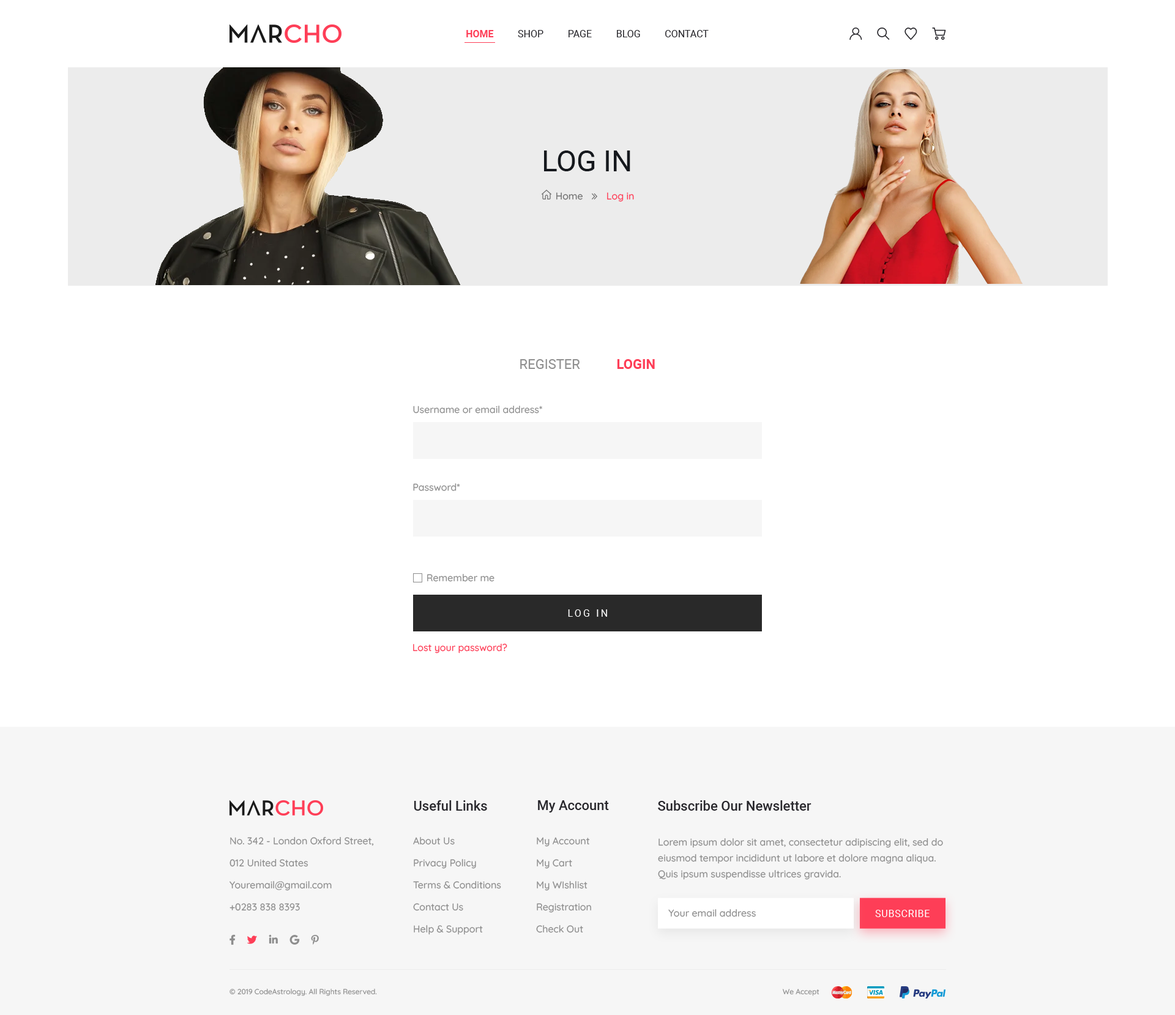
<style>
.page{position:relative;width:1175px;height:1015px;background:#ffffff}
.page>*{position:absolute;margin:0}
.t1{font:9.8px "Roboto-Regular";color:#29282d}
.t2{font:9.8px "Roboto-Bold";color:#fe3e57}
.t3{font:29.4px "Roboto-Regular";color:#15181d}
.t4{font:9.8px "Quicksand-Medium";color:#727272}
.t5{font:9.8px "Quicksand-Medium";color:#fe3e57}
.t6{font:13.5px "Roboto-Regular";color:#909090}
.t7{font:13.5px "Roboto-Bold";color:#fe3e57}
.t8{font:9.8px "Quicksand-Medium";color:#8d8d8d}
.t9{font:9.8px "Roboto-Regular";letter-spacing:0.2em;color:#ffffff}
.t10{font:13.5px "Roboto-Medium";color:#29282d}
.t11{font:9.8px/22px "Quicksand-Medium";color:#8d8d8d}
.t12{font:9.8px/15.9px "Quicksand-Medium";color:#8d8d8d}
.t13{font:9.8px "Roboto-Regular";letter-spacing:0.05em;color:#ffffff;text-transform:uppercase}
.t14{font:7.3px "Quicksand-Medium";color:#8d8d8d}
</style>
<div class="page">
<p class="t1" style="left:466px;top:30px;width:243px;height:7px"><span class="t2">HOME          </span>SHOP          PAGE          BLOG          CONTACT</p>
<p class="t3" style="left:544px;top:151px;width:86px;height:20px">LOG IN</p>
<p class="t4" style="left:556px;top:192px;width:26px;height:8px">Home</p>
<p class="t5" style="left:607px;top:192px;width:27px;height:10px">Log in</p>
<p class="t6" style="left:520px;top:359px;width:60px;height:10px">REGISTER</p>
<p class="t7" style="left:617px;top:359px;width:38px;height:10px">LOGIN</p>
<p class="t8" style="left:413px;top:406px;width:129px;height:8px">Username or email address*</p>
<p class="t8" style="left:413px;top:483px;width:47px;height:8px">Password*</p>
<p class="t8" style="left:427px;top:574px;width:67px;height:8px">Remember me</p>
<p class="t9" style="left:568px;top:609px;width:39px;height:8px">LOG IN</p>
<p class="t5" style="left:413px;top:644px;width:94px;height:9px">Lost your password?</p>
<p class="t10" style="left:414px;top:800px;width:73px;height:11px">Useful Links</p>
<p class="t10" style="left:538px;top:800px;width:71px;height:13px">My Account</p>
<p class="t10" style="left:658px;top:800px;width:153px;height:11px">Subscribe Our Newsletter</p>
<p class="t11" style="left:229px;top:837px;width:145px;height:74px">No. 342 - London Oxford Street,<br>012 United States<br>Youremail@gmail.com<br>+0283 838 8393</p>
<p class="t11" style="left:413px;top:837px;width:88px;height:98px">About Us<br>Privacy Policy<br>Terms &amp; Conditions<br>Contact Us<br>Help &amp; Support</p>
<p class="t11" style="left:536px;top:837px;width:55px;height:96px">My Account<br>My Cart<br>My WIshlist<br>Registration<br>Check Out</p>
<p class="t12" style="left:658px;top:838px;width:285px;height:42px">Lorem ipsum dolor sit amet, consectetur adipiscing elit, sed do eiusmod tempor incididunt ut labore et dolore magna aliqua. Quis ipsum suspendisse ultrices gravida.</p>
<p class="t8" style="left:668px;top:909px;width:88px;height:8px">Your email address</p>
<p class="t13" style="left:875px;top:910px;width:54px;height:7px">Subscribe</p>
<p class="t14" style="left:229px;top:989px;width:148px;height:7px">© 2019 CodeAstrology. All Rights Reserved.</p>
<p class="t14" style="left:783px;top:989px;width:36px;height:7px">We Accept</p>
</div>
